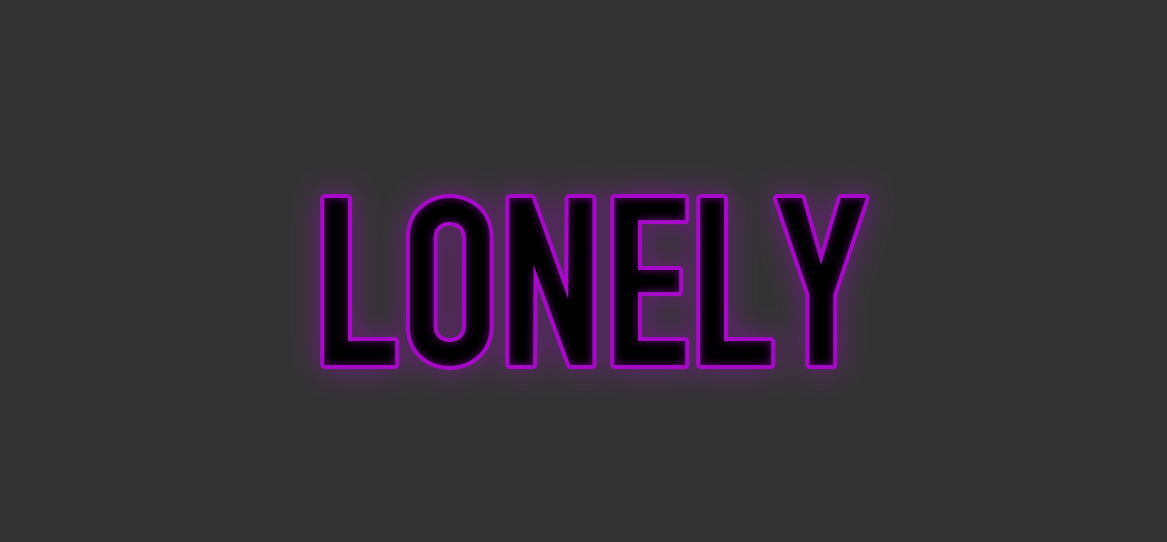
<style>
.page{position:relative;width:1167px;height:542px;background:#333333}
.page>*{position:absolute;margin:0}
.t1{font:233.7px "DINEngschrift";color:#070009}
</style>
<div class="page">
<p class="t1" style="left:324px;top:198px;width:542px;height:168px">LONELY</p>
</div>
